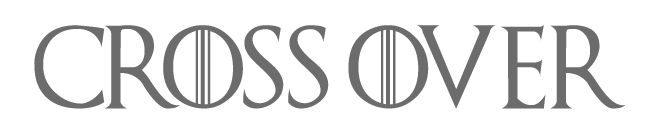
<style>
.page{position:relative;width:660px;height:135px;background:#ffffff}
.page>*{position:absolute;margin:0}
.t1{font:83.3px "GameofThrones";color:#6c6c6c;scale:0.96 1}
</style>
<div class="page">
<p class="t1" style="left:34px;top:25px;width:591px;height:84px">cross over</p>
</div>
